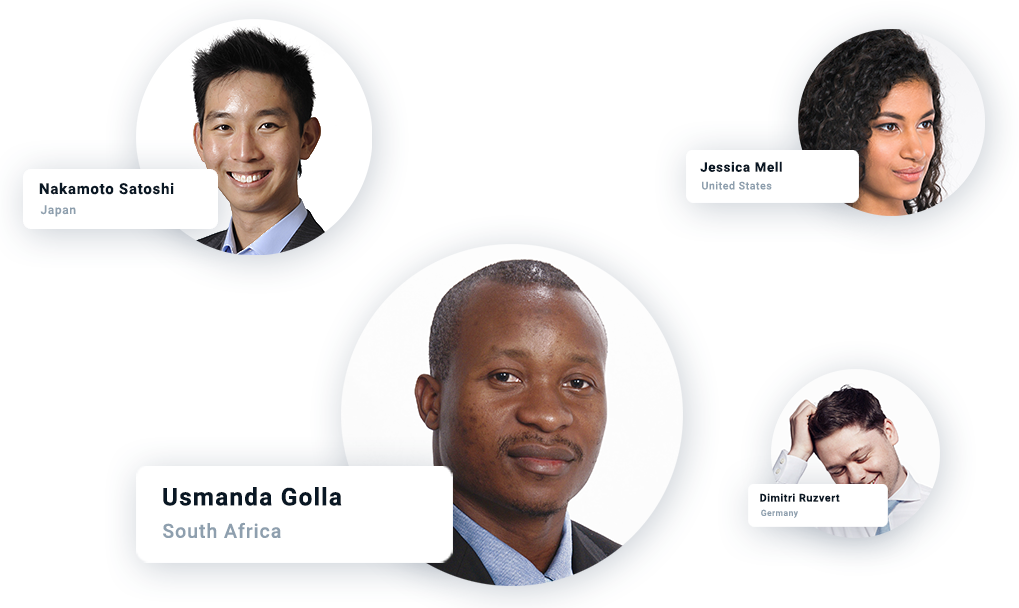
<style>
.page{position:relative;width:1019px;height:608px;background:#ffffff}
.page>*{position:absolute;margin:0}
.t1{font:13.3px "Roboto-Bold";letter-spacing:0.05em;color:#091724}
.t2{font:15px "Roboto-Bold";letter-spacing:0.05em;color:#091724}
.t3{font:10.6px "Roboto-Medium";letter-spacing:0.05em;color:#8e9fae}
.t4{font:12px "Roboto-Medium";letter-spacing:0.05em;color:#8e9fae}
.t5{font:24.3px "Roboto-Bold";letter-spacing:0.05em;color:#091724}
.t6{font:10.7px "Roboto-Bold";letter-spacing:0.05em;color:#091724}
.t7{font:8.6px "Roboto-Medium";letter-spacing:0.05em;color:#8e9fae}
.t8{font:19.5px "Roboto-Medium";letter-spacing:0.05em;color:#8e9fae}
</style>
<div class="page">
<p class="t1" style="left:700px;top:161px;width:82px;height:11px">Jessica Mell</p>
<p class="t2" style="left:39px;top:182px;width:135px;height:13px">Nakamoto Satoshi</p>
<p class="t3" style="left:702px;top:181px;width:70px;height:9px">United States</p>
<p class="t4" style="left:40px;top:205px;width:36px;height:12px">Japan</p>
<p class="t5" style="left:163px;top:487px;width:179px;height:19px">Usmanda Golla</p>
<p class="t6" style="left:760px;top:493px;width:80px;height:9px">Dimitri Ruzvert</p>
<p class="t7" style="left:761px;top:509px;width:37px;height:9px">Germany</p>
<p class="t8" style="left:163px;top:522px;width:118px;height:16px">South Africa</p>
</div>
